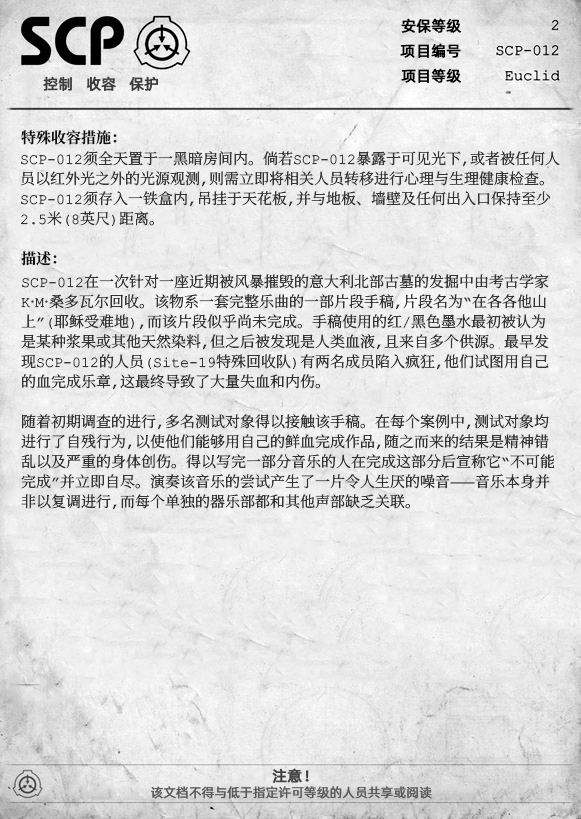
<style>
.page{position:relative;width:581px;height:819px}
.page>*{position:absolute;margin:0}
.t1{font:15px "AlibabaPuHuiTiR";color:#000000;font-weight:bold}
.t2{font:15px "AlibabaPuHuiTiR";color:#3d3d3d;font-weight:bold}
.t3{font:15px "ContainmentBreach-Bold";color:#121212}
.t4{font:15px/20px "ContainmentBreach-Regular";color:#353535}
.t5{font:15px "AlibabaPuHuiTiR";color:#414141;font-weight:bold}
.t6{font:13px "AlibabaPuHuiTiR";color:#575757}
</style>
<div class="page">
<p class="t1" style="left:401px;top:18px;width:61px;height:15px">安保等级</p>
<p class="t1" style="left:400px;top:43px;width:61px;height:15px">项目编号</p>
<p class="t2" style="left:43px;top:76px;width:115px;height:15px">控制   收容   保护</p>
<p class="t1" style="left:401px;top:68px;width:61px;height:15px">项目等级</p>
<p class="t3" style="left:21px;top:130px;width:96px;height:15px">特殊收容措施：</p>
<p class="t4" style="left:20px;top:151px;width:540px;height:75px">SCP-012须全天置于一黑暗房间内。倘若SCP-012暴露于可见光下，或者被任何人<br>员以红外光之外的光源观测，则需立即将相关人员转移进行心理与生理健康检查。<br>SCP-012须存入一铁盒内，吊挂于天花板，并与地板、墙壁及任何出入口保持至少<br>2.5米（8英尺）距离。</p>
<p class="t3" style="left:21px;top:251px;width:36px;height:15px">描述：</p>
<p class="t4" style="left:21px;top:274px;width:534px;height:236px">SCP-012在一次针对一座近期被风暴摧毁的意大利北部古墓的发掘中由考古学家<br>K·M·桑多瓦尔回收。该物系一套完整乐曲的一部片段手稿，片段名为“在各各他山<br>上”（耶稣受难地），而该片段似乎尚未完成。手稿使用的红/黑色墨水最初被认为<br>是某种浆果或其他天然染料，但之后被发现是人类血液，且来自多个供源。最早发<br>现SCP-012的人员（Site-19特殊回收队）有两名成员陷入疯狂，他们试图用自己<br>的血完成乐章，这最终导致了大量失血和内伤。<br><br>随着初期调查的进行，多名测试对象得以接触该手稿。在每个案例中，测试对象均<br>进行了自残行为，以使他们能够用自己的鲜血完成作品，随之而来的结果是精神错<br>乱以及严重的身体创伤。得以写完一部分音乐的人在完成这部分后宣称它“不可能<br>完成”并立即自尽。演奏该音乐的尝试产生了一片令人生厌的噪音——音乐本身并<br>非以复调进行，而每个单独的器乐部都和其他声部缺乏关联。</p>
<p class="t5" style="left:272px;top:768px;width:37px;height:15px">注意！</p>
<p class="t6" style="left:151px;top:786px;width:281px;height:13px">该文档不得与低于指定许可等级的人员共享或阅读</p>
</div>
